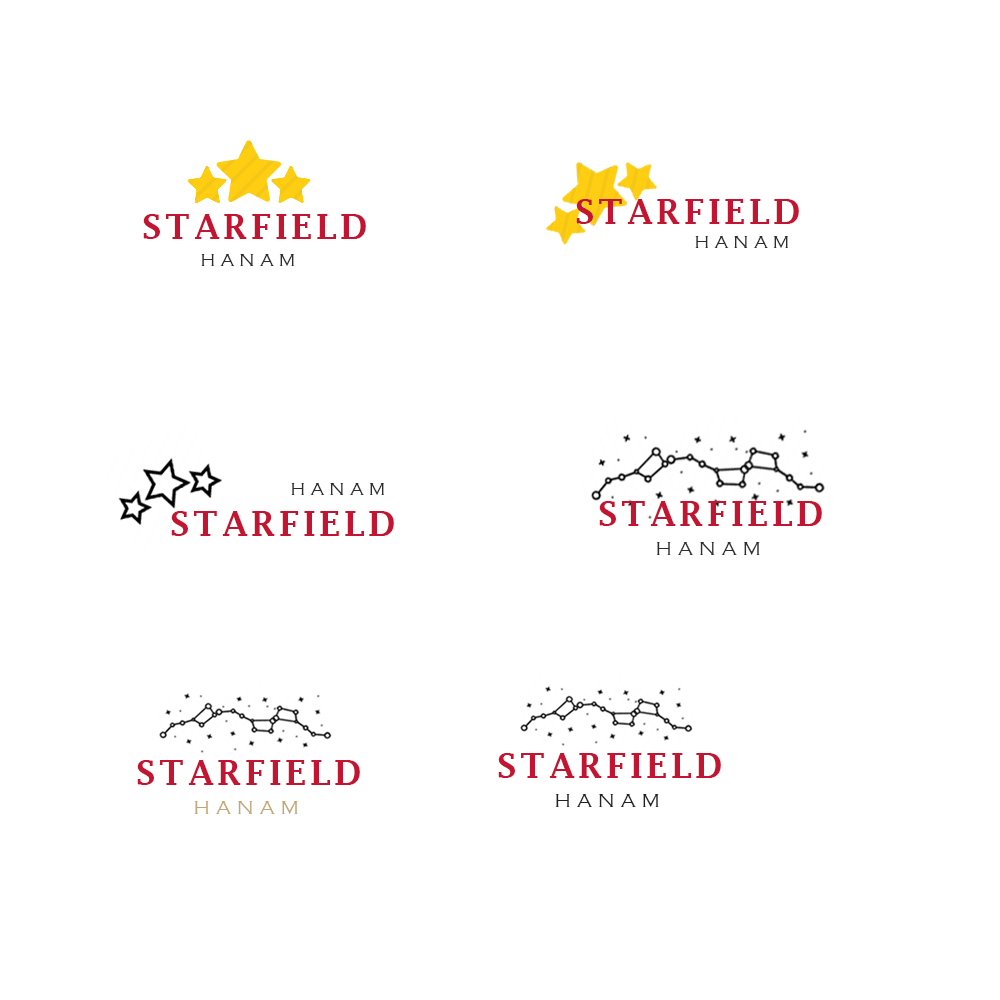
<style>
.page{position:relative;width:1000px;height:1000px;background:#ffffff}
.page>*{position:absolute;margin:0}
.t1{font:34.3px "LucidaFax-Demi";letter-spacing:0.1em;color:#c31531}
.t2{font:18px "CopperplateGothic-Light";letter-spacing:0.3em;color:#2d2d2d}
.t3{font:20px "CopperplateGothic-Light";letter-spacing:0.3em;color:#2d2d2d}
.t4{font:20px "CopperplateGothic-Light";letter-spacing:0.3em;color:#222120}
.t5{font:20px "CopperplateGothic-Light";letter-spacing:0.3em;color:#c1a774}
</style>
<div class="page">
<p class="t1" style="left:576px;top:199px;width:223px;height:25px">STARFIELD</p>
<p class="t1" style="left:143px;top:214px;width:223px;height:25px">STARFIELD</p>
<p class="t2" style="left:695px;top:236px;width:93px;height:12px">HANAM</p>
<p class="t2" style="left:201px;top:254px;width:93px;height:12px">HANAM</p>
<p class="t2" style="left:291px;top:483px;width:93px;height:12px">HANAM</p>
<p class="t1" style="left:599px;top:501px;width:223px;height:25px">STARFIELD</p>
<p class="t1" style="left:171px;top:511px;width:223px;height:25px">STARFIELD</p>
<p class="t3" style="left:656px;top:542px;width:104px;height:13px">HANAM</p>
<p class="t1" style="left:137px;top:760px;width:223px;height:25px">STARFIELD</p>
<p class="t1" style="left:498px;top:753px;width:223px;height:25px">STARFIELD</p>
<p class="t4" style="left:555px;top:794px;width:104px;height:13px">HANAM</p>
<p class="t5" style="left:194px;top:801px;width:104px;height:13px">HANAM</p>
</div>
